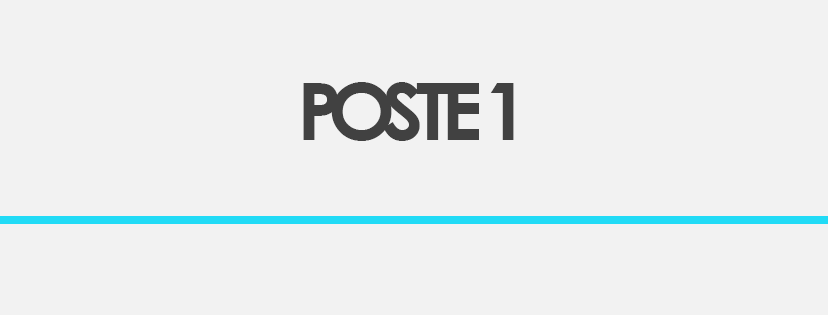
<style>
.page{position:relative;width:828px;height:315px;background:#f2f2f2}
.page>*{position:absolute;margin:0}
.t1{font:80px "CenturyGothic-Bold";letter-spacing:-0.1em;color:#414141}
.t2{font:80px "CenturyGothic-Bold";letter-spacing:0.14em;color:#414141}
</style>
<div class="page">
<p class="t1" style="left:303px;top:82px;width:211px;height:59px">POSTE<span class="t2">1</span></p>
</div>
